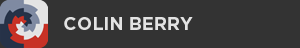
<style>
.page{position:relative;width:300px;height:48px;background:#333333}
.page>*{position:absolute;margin:0}
.t1{font:18px "Gotham-Bold";color:#e3e3e3}
</style>
<div class="page">
<p class="t1" style="left:64px;top:17px;width:129px;height:13px">COLIN BERRY</p>
</div>
